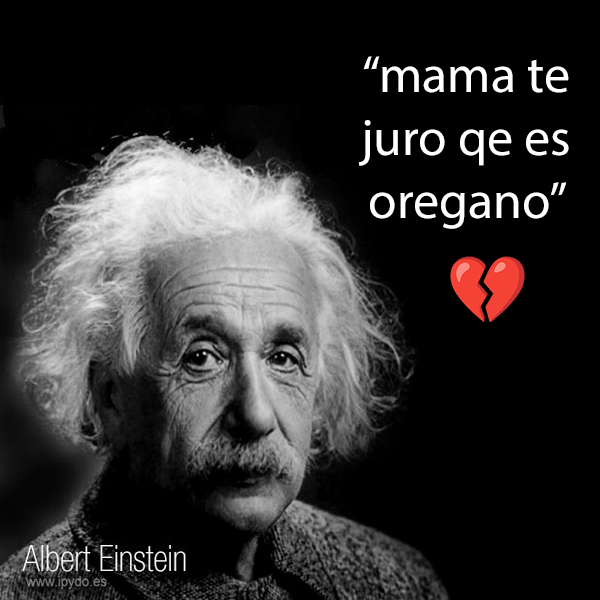
<style>
.page{position:relative;width:600px;height:600px;background:#000000}
.page>*{position:absolute;margin:0}
.t1{font:51.9px "MyriadPro-Regular";color:#ffffff}
</style>
<div class="page">
<p class="t1" style="left:358px;top:56px;width:211px;height:173px;text-align:center">“mama te<br>juro qe es<br>oregano”</p>
</div>
